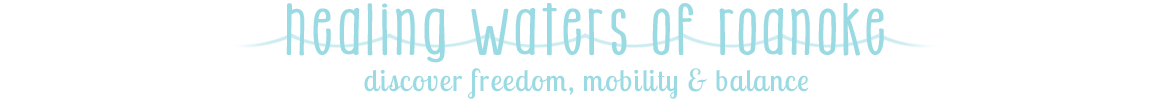
<style>
.page{position:relative;width:1170px;height:100px;background:#ffffff}
.page>*{position:absolute;margin:0}
.t1{font:70px "KGHowManyTimes";letter-spacing:0.044em;color:#9adae2;scale:1.33 1}
.t2{font:30px "LobsterTwo";letter-spacing:0.044em;color:#9adae2}
</style>
<div class="page">
<p class="t1" style="left:286px;top:2px;width:598px;height:61px">healing waters of roanoke</p>
<p class="t2" style="left:364px;top:68px;width:444px;height:31px">discover freedom, mobility &amp; balance</p>
</div>
